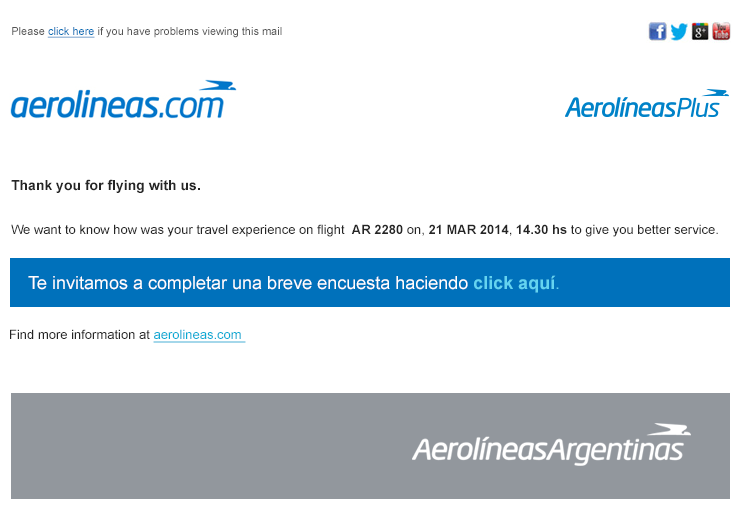
<style>
.page{position:relative;width:740px;height:510px;background:#ffffff}
.page>*{position:absolute;margin:0}
.t1{font:11px "ArialMT";color:#555555}
.t2{font:11px "ArialMT";color:#006eb5;text-decoration:underline}
.t3{font:13px "ArialMT";color:#252525}
.t4{font:14px "Arial-BoldMT";color:#252525}
.t5{font:13px "Arial-BoldMT";color:#252525}
.t6{font:18px "ArialMT";color:#ffffff}
.t7{font:18px "Arial-BoldMT";color:#64d4f0}
.t8{font:18px "ArialMT";color:#64d4f0}
.t9{font:13px "ArialMT";color:#08abd4}
.t10{font:13px "ArialMT";color:#08abd4;text-decoration:underline}
</style>
<div class="page">
<p class="t1" style="left:12px;top:27px;width:270px;height:11px">Please <span class="t2">click here </span>if you have problems viewing this mail</p>
<p class="t3" style="left:11px;top:179px;width:707px;height:58px"><span class="t4">Thank you for flying with us.<br><br><br></span>We want to know how was your travel experience on flight  <span class="t5">AR 2280 </span>on, <span class="t5">21 MAR 2014</span>, <span class="t5">14.30 hs </span>to give you better service.</p>
<p class="t6" style="left:28px;top:275px;width:531px;height:18px">Te invitamos a completar una breve encuesta haciendo <span class="t7">click aquí</span><span class="t8">.</span></p>
<p class="t3" style="left:10px;top:329px;width:236px;height:14px"><span class="t9"><br></span><br>Find more information at <span class="t10">aerolineas.com</span></p>
</div>
